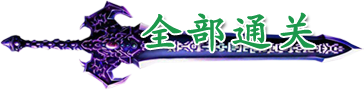
<style>
.page{position:relative;width:364px;height:90px;background:#ffffff}
.page>*{position:absolute;margin:0}
.t1{font:40px "KaiTi_GB2312";letter-spacing:0.1em;color:#1c984b;font-weight:bold}
</style>
<div class="page">
<p class="t1" style="left:142px;top:12px;width:173px;height:40px">全部通关</p>
</div>
